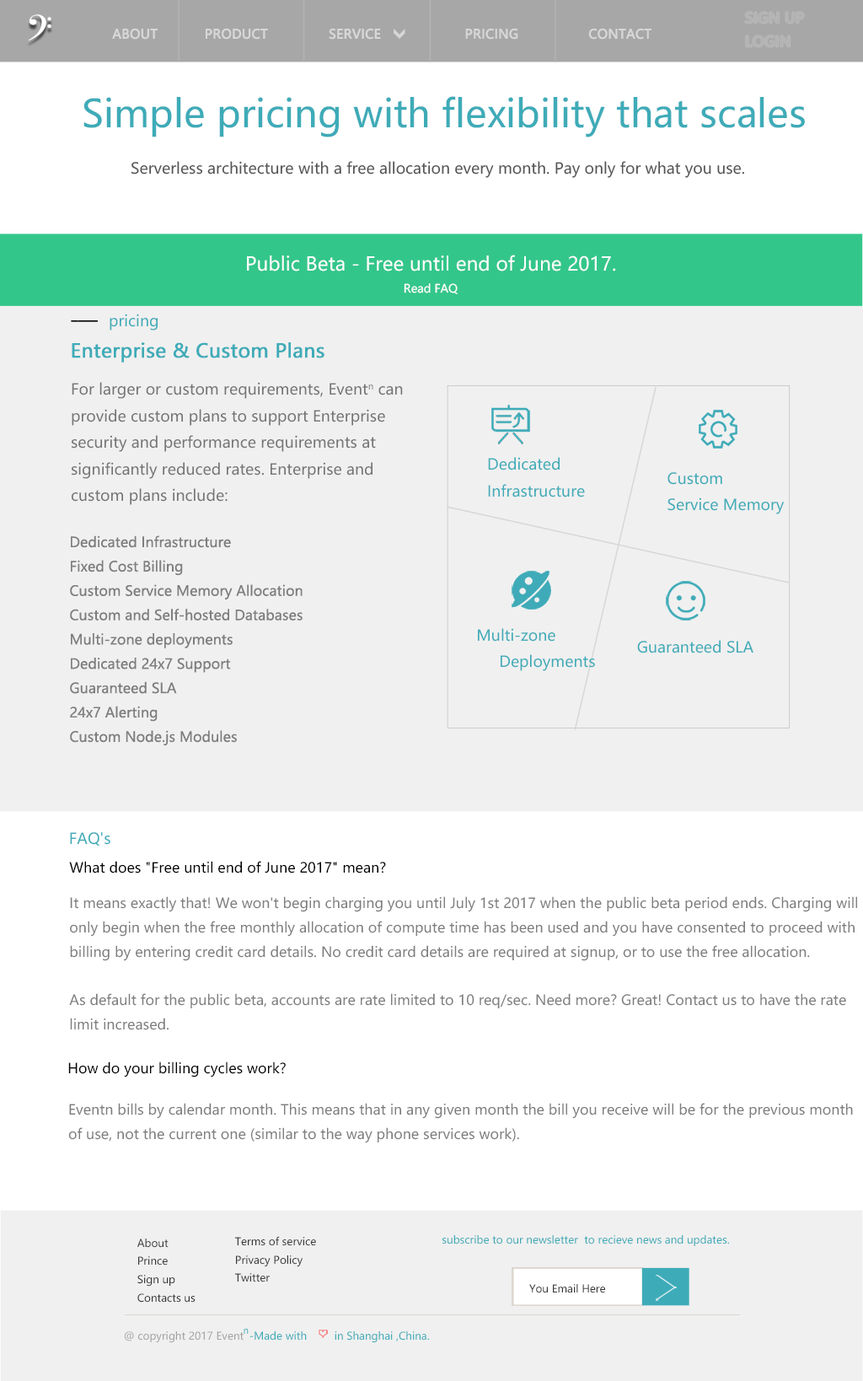
<style>
.page{position:relative;width:863px;height:1381px;background:#f0f0f0}
.page>*{position:absolute;margin:0}
.t1{font:13.9px "MicrosoftYaHei";color:#b3b3b3;font-weight:bold}
.t2{font:12.6px "MicrosoftYaHei";color:#d7d7d7;font-weight:bold}
.t3{font:37.9px "MicrosoftYaHei";color:#3eabb8}
.t4{font:15.2px "MicrosoftYaHei";color:#555555}
.t5{font:19px "MicrosoftYaHei";color:#fefefe}
.t6{font:11.4px "MicrosoftYaHei";color:#fefefe}
.t7{font:15.2px "MicrosoftYaHei";color:#3fabb8}
.t8{font:13.9px "MicrosoftYaHei";color:#000000;font-weight:bold}
.t9{font:19px "MicrosoftYaHei";color:#3eabb8;font-weight:bold}
.t10{font:15.2px "MicrosoftYaHei";color:#747474}
.t11{font:15.2px "MicrosoftYaHei";color:#3eabb8}
.t12{font:13.9px "MicrosoftYaHei";color:#7e7e7e}
.t13{font:13.9px "MicrosoftYaHei";color:#000000}
.t14{font:13.9px "MicrosoftYaHei";color:#010101}
.t15{font:13.9px "MicrosoftYaHei";color:#7d7d7d}
.t16{font:10.5px "MicrosoftYaHei";color:#383838}
.t17{font:10.5px "MicrosoftYaHei";color:#3eabb8}
.t18{font:10.5px "MicrosoftYaHei";color:#a3a3a3}
.t19{font:9px "MicrosoftYaHei";color:#3eabb8}
</style>
<div class="page">
<p class="t1" style="left:745px;top:12px;width:59px;height:35px">SIGN UP <br>LOGIN</p>
<p class="t2" style="left:112px;top:28px;width:46px;height:12px">ABOUT</p>
<p class="t2" style="left:206px;top:28px;width:62px;height:12px">PRODUCT</p>
<p class="t2" style="left:329px;top:28px;width:52px;height:12px">SERVICE</p>
<p class="t2" style="left:465px;top:28px;width:54px;height:12px">PRICING</p>
<p class="t2" style="left:589px;top:28px;width:63px;height:12px">CONTACT</p>
<p class="t3" style="left:83px;top:96px;width:722px;height:41px">Simple pricing with flexibility that scales</p>
<p class="t4" style="left:131px;top:161px;width:614px;height:17px">Serverless architecture with a free allocation every month. Pay only for what you use.</p>
<p class="t5" style="left:247px;top:255px;width:369px;height:16px">Public Beta - Free until end of June 2017.</p>
<p class="t6" style="left:404px;top:283px;width:55px;height:11px">Read FAQ</p>
<p class="t7" style="left:110px;top:314px;width:48px;height:17px">pricing</p>
<p class="t8" style="left:71px;top:320px;width:27px;height:2px">____</p>
<p class="t9" style="left:72px;top:342px;width:253px;height:21px">Enterprise &amp; Custom Plans</p>
<p class="t10" style="left:72px;top:382px;width:331px;height:123px">For larger or custom requirements, Eventn can<br>provide custom plans to support Enterprise <br>security and performance requirements at <br>significantly reduced rates. Enterprise and <br>custom plans include:</p>
<p class="t11" style="left:488px;top:457px;width:97px;height:40px">Dedicated <br>Infrastructure</p>
<p class="t11" style="left:668px;top:472px;width:117px;height:42px">Custom <br>Service Memory</p>
<p class="t12" style="left:70px;top:535px;width:233px;height:211px">Dedicated Infrastructure<br>Fixed Cost Billing<br>Custom Service Memory Allocation<br>Custom and Self-hosted Databases<br>Multi-zone deployments<br>Dedicated 24x7 Support<br>Guaranteed SLA<br>24x7 Alerting<br>Custom Node.js Modules</p>
<p class="t11" style="left:478px;top:628px;width:117px;height:43px">Multi-zone <br> Deployments</p>
<p class="t11" style="left:637px;top:640px;width:117px;height:13px">Guaranteed SLA</p>
<p class="t11" style="left:70px;top:832px;width:40px;height:14px">FAQ's</p>
<p class="t13" style="left:69px;top:861px;width:317px;height:13px">What does "Free until end of June 2017" mean?</p>
<p class="t12" style="left:69px;top:896px;width:788px;height:134px">It means exactly that! We won't begin charging you until July 1st 2017 when the public beta period ends. Charging will<br>only begin when the free monthly allocation of compute time has been used and you have consented to proceed with <br>billing by entering credit card details. No credit card details are required at signup, or to use the free allocation.<br><br>As default for the public beta, accounts are rate limited to 10 req/sec. Need more? Great! Contact us to have the rate<br>limit increased.</p>
<p class="t14" style="left:68px;top:1062px;width:218px;height:16px">How do your billing cycles work?</p>
<p class="t15" style="left:68px;top:1103px;width:785px;height:40px">Eventn bills by calendar month. This means that in any given month the bill you receive will be for the previous month<br>of use, not the current one (similar to the way phone services work).</p>
<p class="t16" style="left:137px;top:1239px;width:59px;height:64px">About<br>Prince<br>Sign up<br>Contacts us</p>
<p class="t16" style="left:235px;top:1236px;width:81px;height:46px">Terms of service<br>Privacy Policy<br>Twitter</p>
<p class="t17" style="left:443px;top:1235px;width:286px;height:11px">subscribe to our newsletter  to recieve news and updates.</p>
<p class="t16" style="left:530px;top:1284px;width:75px;height:9px">You Email Here</p>
<p class="t18" style="left:124px;top:1331px;width:120px;height:12px">@ copyright 2017 Event</p>
<p class="t19" style="left:244px;top:1329px;width:5px;height:5px">n</p>
<p class="t17" style="left:250px;top:1331px;width:57px;height:10px">-Made with</p>
<p class="t17" style="left:335px;top:1331px;width:94px;height:12px">in Shanghai ,China.</p>
</div>
